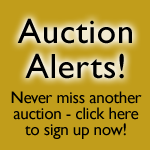
<style>
.page{position:relative;width:150px;height:150px;background:#c19d1b}
.page>*{position:absolute;margin:0}
.t1{font:35px/35px "GillSansMT";letter-spacing:0.02em;color:#000000}
.t2{font:17px/16px "GillSansMT";letter-spacing:-0.02em;color:#000000}
</style>
<div class="page">
<p class="t1" style="left:17px;top:18px;width:115px;height:61px;text-align:center">Auction<br>Alerts!</p>
<p class="t2" style="left:11px;top:91px;width:131px;height:48px;text-align:center">Never miss another<br>auction - click here<br>to sign up now!</p>
</div>
